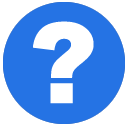
<style>
.page{position:relative;width:128px;height:128px;background:#2573e4}
.page>*{position:absolute;margin:0}
.t1{font:112px "Arial-Black";color:#ffffff}
</style>
<div class="page">
<p class="t1" style="left:33px;top:21px;width:61px;height:83px">?</p>
</div>
